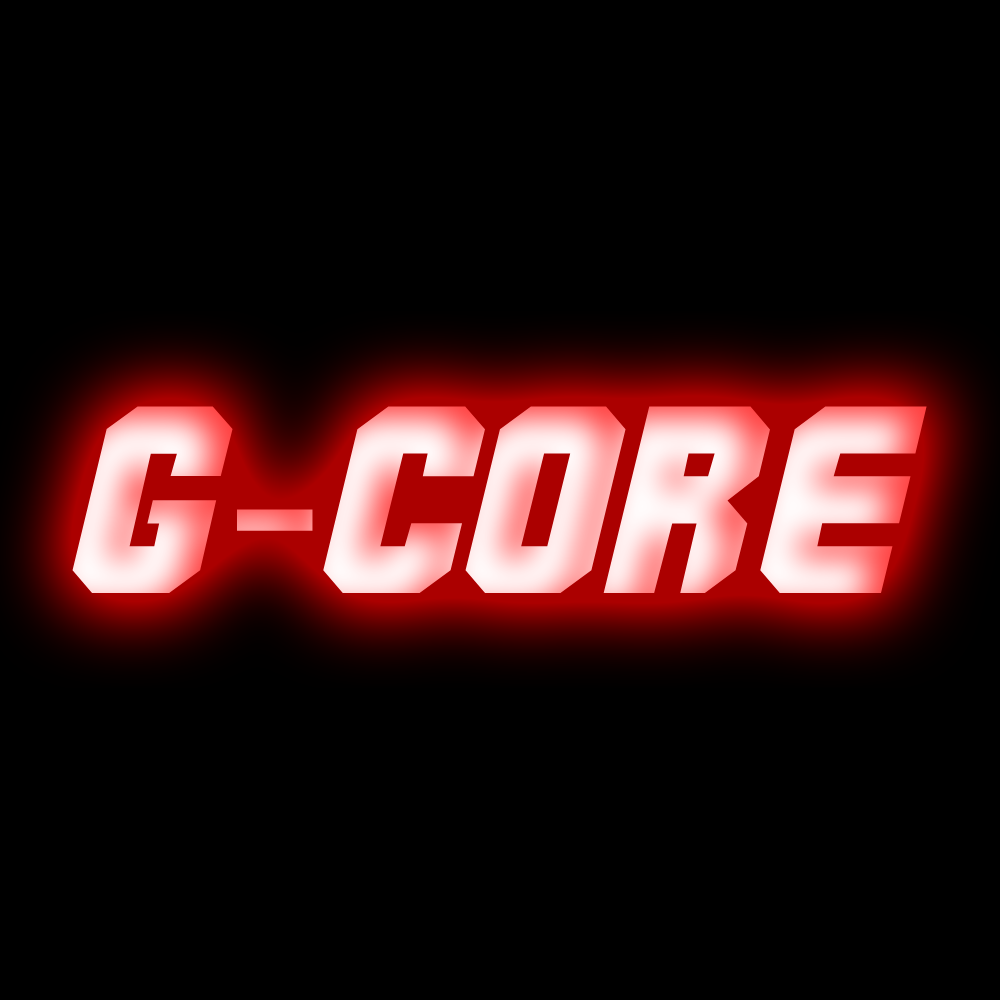
<style>
.page{position:relative;width:1000px;height:1000px;background:#000000}
.page>*{position:absolute;margin:0}
.t1{font:266.3px "Commando";scale:1.08 1}
.t2{font:266.3px "DejaVuSans";scale:1.08 1}
</style>
<div class="page">
<p class="t1" style="left:72px;top:406px;width:855px;height:187px">G<span class="t2">-</span>CORE</p>
</div>
